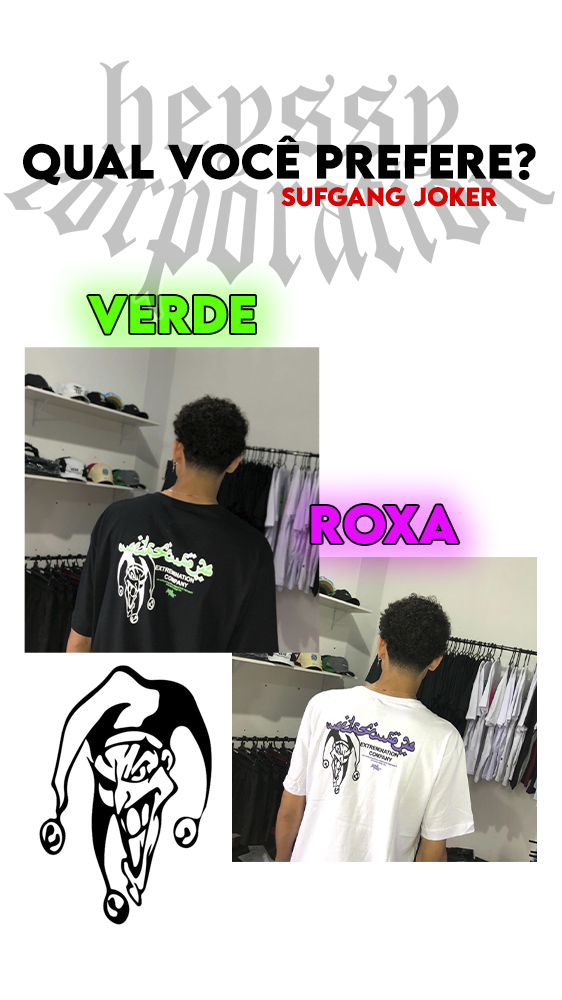
<style>
.page{position:relative;width:562px;height:1000px;background:#ffffff}
.page>*{position:absolute;margin:0}
.t1{font:43px "LEMONMILK-Bold";color:#010101}
.t2{font:23px "LEMONMILK-Bold";color:#d80303}
.t3{font:46.7px "LEMONMILK-Bold";color:#5cff0c}
.t4{font:46.7px "LEMONMILK-Bold";color:#e50cff}
</style>
<div class="page">
<p class="t1" style="left:23px;top:135px;width:513px;height:51px">QUAL VOCê PREFERE?</p>
<p class="t2" style="left:281px;top:187px;width:216px;height:20px">sufgang joker</p>
<p class="t3" style="left:88px;top:296px;width:167px;height:38px">verde</p>
<p class="t4" style="left:311px;top:505px;width:148px;height:39px">ROXA</p>
</div>
